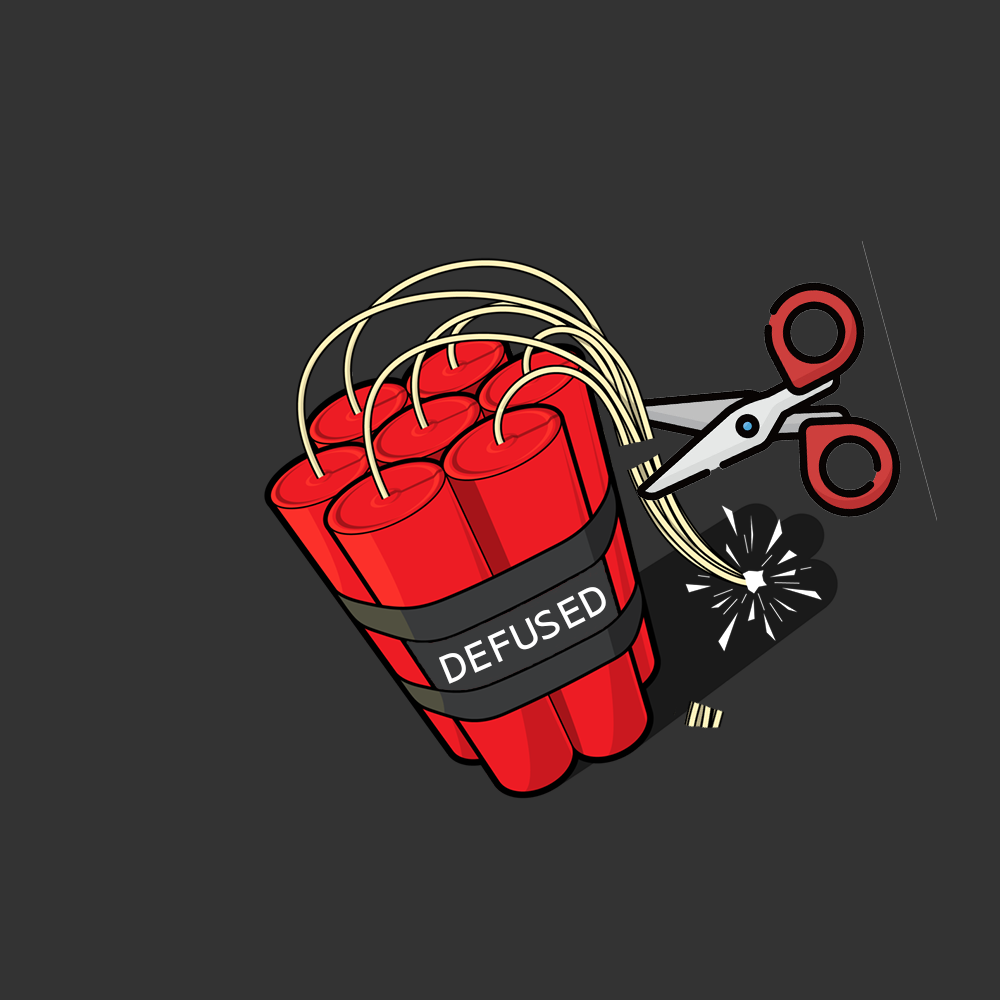
<style>
.page{position:relative;width:1000px;height:1000px;background:#333333}
.page>*{position:absolute;margin:0}
.t1{font:44px "Consolas";color:#ffffff;scale:1.05 1}
</style>
<div class="page">
<p class="t1" style="left:438px;top:587px;width:168px;height:97px;rotate:-25deg">DEFUSED</p>
</div>
